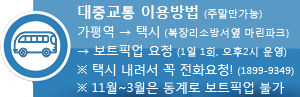
<style>
.page{position:relative;width:300px;height:97px;background:#5999c5}
.page>*{position:absolute;margin:0}
.t1{font:12.5px/18.8px "MalgunGothicRegular";color:#ffffff}
.t2{font:14.6px/20.8px "MalgunGothicBold";color:#ffffff}
.t3{font:10.4px/20.8px "MalgunGothicRegular";color:#ffffff}
.t4{font:10.4px/18.8px "MalgunGothicRegular";color:#ffffff}
</style>
<div class="page">
<p class="t1" style="left:77px;top:5px;width:217px;height:89px"><span class="t2">대중교통 이용방법 </span><span class="t3">(주말만가능)<br></span>가평역 → 택시 <span class="t4">(복장리소방서옆 마린파크)<br></span>→ 보트픽업 요청 <span class="t4">(1일 1회, 오후2시 운영)<br></span>※ 택시 내려서 꼭 전화요청! <span class="t4">(1899-9349)</span><br>※ 11월~3월은 동계로 보트픽업 불가</p>
</div>
